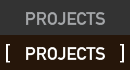
<style>
.page{position:relative;width:130px;height:70px;background:#333333}
.page>*{position:absolute;margin:0}
.t1{font:18px "DINMittelschriftStd";color:#a4a6a9}
.t2{font:22px "DINMittelschriftStd";color:#ffffff}
.t3{font:18px "DINMittelschriftStd";color:#ffffff}
</style>
<div class="page">
<p class="t1" style="left:26px;top:12px;width:79px;height:13px">PROJECTS</p>
<p class="t2" style="left:6px;top:44px;width:4px;height:19px">[</p>
<p class="t3" style="left:26px;top:47px;width:79px;height:13px">PROJECTS</p>
<p class="t2" style="left:120px;top:44px;width:4px;height:19px">]</p>
</div>
